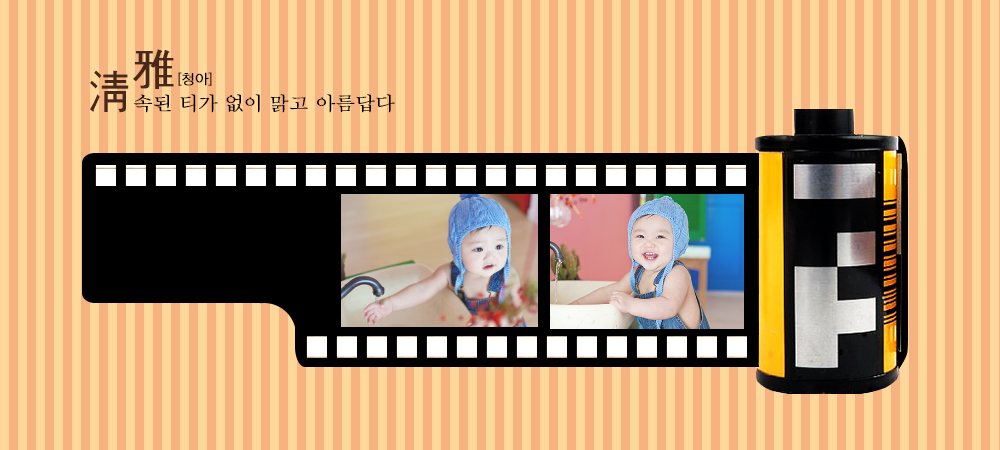
<style>
.page{position:relative;width:1000px;height:450px;background:#ffd79a}
.page>*{position:absolute;margin:0}
.t1{font:47.7px "Gulim";color:#48281b;font-weight:bold;scale:0.94 1}
.t2{font:49.2px "Gulim";color:#48281b;font-weight:bold;scale:0.92 1}
.t3{font:14px "H2gtrM";letter-spacing:-0.075em;color:#000000;font-weight:bold}
.t4{font:19px "Batang";color:#000000;font-weight:bold;scale:1.05 1}
</style>
<div class="page">
<p class="t1" style="left:133px;top:49px;width:41px;height:40px">雅</p>
<p class="t2" style="left:90px;top:70px;width:39px;height:43px">淸</p>
<p class="t3" style="left:178px;top:72px;width:34px;height:14px">[청아]</p>
<p class="t4" style="left:133px;top:94px;width:262px;height:19px">속된 티가 없이 맑고 아름답다</p>
</div>
